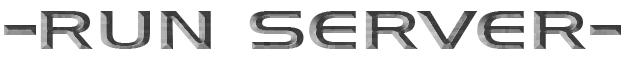
<style>
.page{position:relative;width:625px;height:60px;background:#ffffff}
.page>*{position:absolute;margin:0}
.t1{font:54px "HanzelExtendedNormal"}
</style>
<div class="page">
<p class="t1" style="left:40px;top:11px;width:546px;height:38px">RUN SERVER</p>
</div>
